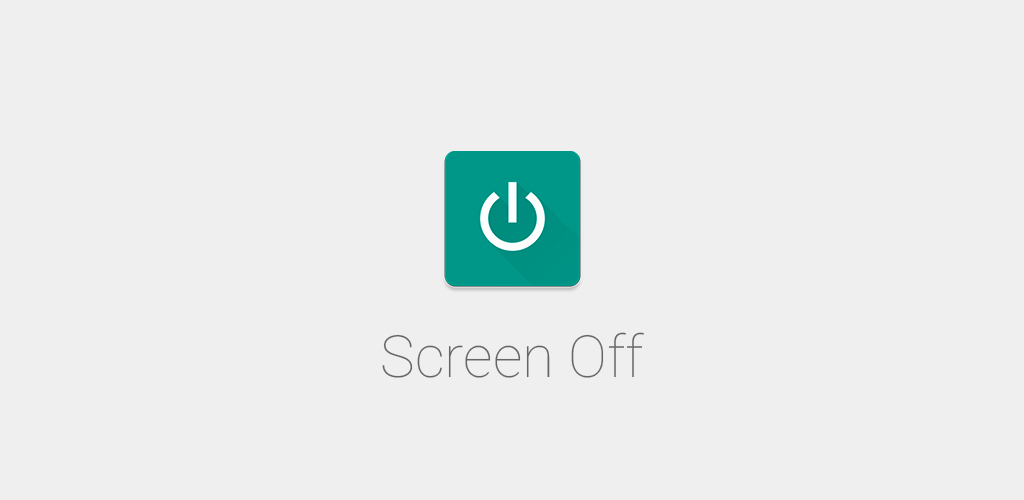
<style>
.page{position:relative;width:1024px;height:500px;background:#efefef}
.page>*{position:absolute;margin:0}
.t1{font:58.3px "Roboto-Thin";color:#666666}
</style>
<div class="page">
<p class="t1" style="left:382px;top:332px;width:262px;height:46px">Screen Off</p>
</div>
